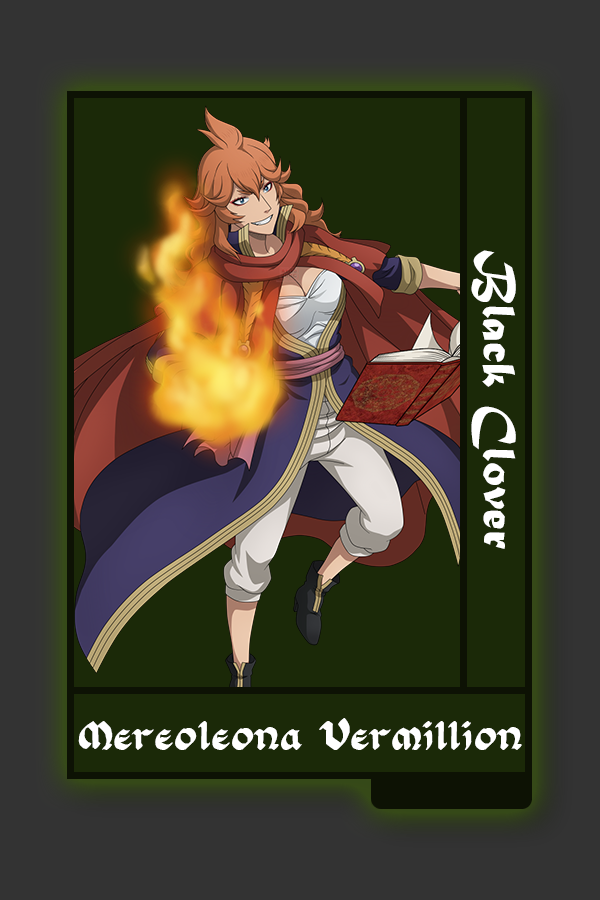
<style>
.page{position:relative;width:600px;height:900px;background:#1b2908}
.page>*{position:absolute;margin:0}
.t1{font:48.8px "MaturaMTScriptCapitals";color:#ffffff}
.t2{font:35.1px "FloranteatLaura";color:#ffffff}
</style>
<div class="page">
<p class="t1" style="left:471px;top:250px;width:45px;height:299px;rotate:90deg">Black Clover</p>
<p class="t2" style="left:78px;top:718px;width:444px;height:32px">Mereoleona Vermillion</p>
</div>
